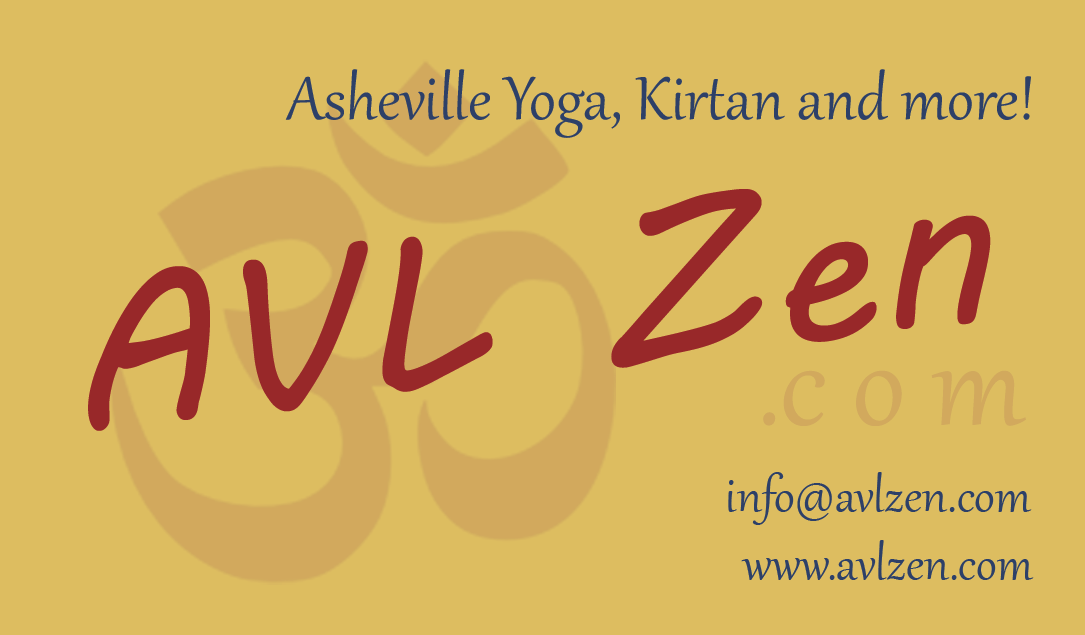
<style>
.page{position:relative;width:1085px;height:635px;background:#ddbd60}
.page>*{position:absolute;margin:0}
.t1{font:75px "Gabriola";color:#2d4068}
.t2{font:216.7px "MVBoli";color:#982829}
.t3{font:150px "Gabriola";color:#d2a95d}
.t4{font:58.3px "Gabriola";color:#2d4068}
</style>
<div class="page">
<p class="t1" style="left:285px;top:69px;width:746px;height:69px">Asheville Yoga, Kirtan and more!</p>
<p class="t2" style="left:88px;top:189px;width:903px;height:242px;rotate:-7deg">AVL Zen</p>
<p class="t3" style="left:763px;top:370px;width:263px;height:56px">.c o m</p>
<p class="t4" style="left:728px;top:472px;width:304px;height:53px">info@avlzen.com</p>
<p class="t4" style="left:741px;top:540px;width:293px;height:40px">www.avlzen.com</p>
</div>
